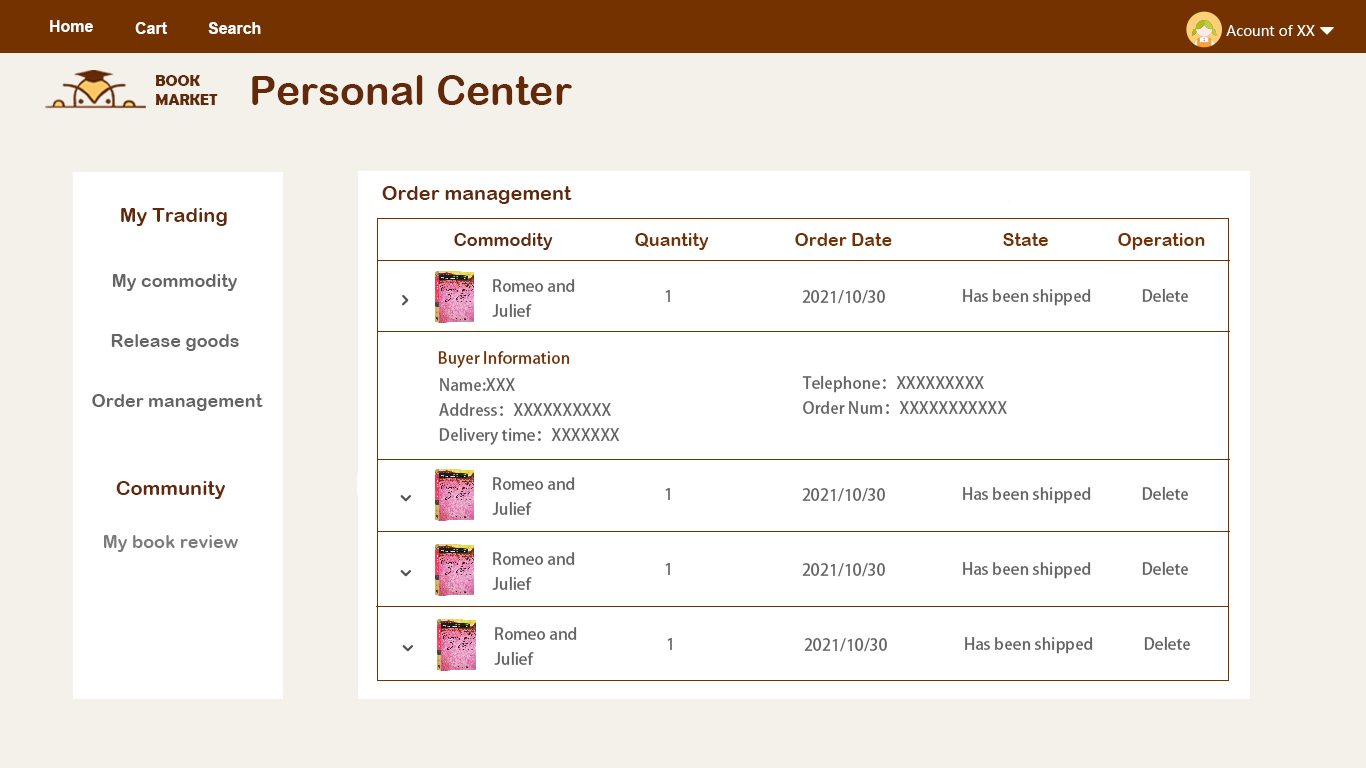
<style>
.page{position:relative;width:1366px;height:768px;background:#ffffff}
.page>*{position:absolute;margin:0}
.t1{font:16px "Arial-BoldMT";color:#ffffff}
.t2{font:14px "MicrosoftYaHeiUI";color:#ffffff}
.t3{font:15.9px/9.5px "BerlinSansFBDemi-Bold";color:#622a09}
.t4{font:40.9px "ArialRoundedMTBold";color:#622a09}
.t5{font:20px "ArialRoundedMTBold";color:#622a09}
.t6{font:18px "ArialRoundedMTBold";color:#622a09}
.t7{font:18px "ArialRoundedMTBold";color:#743200}
.t8{font:18px "ArialRoundedMTBold";color:#656464}
.t9{font:16px/25px "AdobeHeitiStd-Regular";color:#656464}
.t10{font:16px "AdobeHeitiStd-Regular";color:#656464}
.t11{font:16px "AdobeHeitiStd-Regular";color:#743200}
.t12{font:18px "ArialRoundedMTBold";color:#7c7b7b}
</style>
<div class="page">
<p class="t1" style="left:50px;top:20px;width:43px;height:12px">Home</p>
<p class="t1" style="left:135px;top:22px;width:32px;height:12px">Cart</p>
<p class="t1" style="left:208px;top:22px;width:53px;height:12px">Search</p>
<p class="t2" style="left:1226px;top:25px;width:89px;height:11px">Acount of XX</p>
<p class="t3" style="left:156px;top:75px;width:62px;height:30px">BOOK <br><br>MARKET</p>
<p class="t4" style="left:252px;top:75px;width:320px;height:30px">Personal Center</p>
<p class="t5" style="left:382px;top:186px;width:190px;height:18px">Order management</p>
<p class="t5" style="left:121px;top:208px;width:106px;height:18px">My Trading</p>
<p class="t6" style="left:454px;top:233px;width:99px;height:17px">Commodity</p>
<p class="t7" style="left:635px;top:233px;width:74px;height:17px">Quantity</p>
<p class="t7" style="left:795px;top:233px;width:97px;height:13px">Order Date</p>
<p class="t7" style="left:1003px;top:233px;width:45px;height:13px">State</p>
<p class="t7" style="left:1118px;top:233px;width:87px;height:17px">Operation</p>
<p class="t8" style="left:113px;top:274px;width:124px;height:17px">My commodity</p>
<p class="t9" style="left:492px;top:279px;width:83px;height:38px">Romeo and <br>Julief</p>
<p class="t10" style="left:665px;top:290px;width:5px;height:12px">1</p>
<p class="t10" style="left:802px;top:290px;width:83px;height:14px">2021/10/30</p>
<p class="t10" style="left:963px;top:289px;width:128px;height:17px">Has been shipped</p>
<p class="t10" style="left:1142px;top:288px;width:46px;height:14px">Delete</p>
<p class="t8" style="left:111px;top:334px;width:128px;height:17px">Release goods</p>
<p class="t11" style="left:438px;top:351px;width:132px;height:17px">Buyer Information</p>
<p class="t9" style="left:802px;top:375px;width:205px;height:39px">Telephone：XXXXXXXXX<br>Order Num：XXXXXXXXXXX</p>
<p class="t9" style="left:439px;top:378px;width:172px;height:38px">Name:XXX<br>Address：XXXXXXXXXX</p>
<p class="t8" style="left:92px;top:394px;width:171px;height:17px">Order management</p>
<p class="t10" style="left:439px;top:427px;width:181px;height:18px">Delivery time：XXXXXXX</p>
<p class="t5" style="left:116px;top:481px;width:109px;height:18px">Community</p>
<p class="t9" style="left:492px;top:477px;width:83px;height:38px">Romeo and <br>Julief</p>
<p class="t10" style="left:1142px;top:486px;width:46px;height:14px">Delete</p>
<p class="t10" style="left:665px;top:488px;width:5px;height:12px">1</p>
<p class="t10" style="left:802px;top:488px;width:83px;height:14px">2021/10/30</p>
<p class="t10" style="left:963px;top:487px;width:128px;height:17px">Has been shipped</p>
<p class="t12" style="left:104px;top:535px;width:134px;height:17px">My book review</p>
<p class="t9" style="left:492px;top:552px;width:83px;height:38px">Romeo and <br>Julief</p>
<p class="t10" style="left:665px;top:563px;width:5px;height:12px">1</p>
<p class="t10" style="left:802px;top:563px;width:83px;height:14px">2021/10/30</p>
<p class="t10" style="left:963px;top:562px;width:128px;height:17px">Has been shipped</p>
<p class="t10" style="left:1142px;top:561px;width:46px;height:14px">Delete</p>
<p class="t9" style="left:494px;top:627px;width:83px;height:38px">Romeo and <br>Julief</p>
<p class="t10" style="left:667px;top:638px;width:5px;height:12px">1</p>
<p class="t10" style="left:804px;top:638px;width:83px;height:14px">2021/10/30</p>
<p class="t10" style="left:965px;top:637px;width:128px;height:17px">Has been shipped</p>
<p class="t10" style="left:1144px;top:636px;width:46px;height:14px">Delete</p>
</div>
